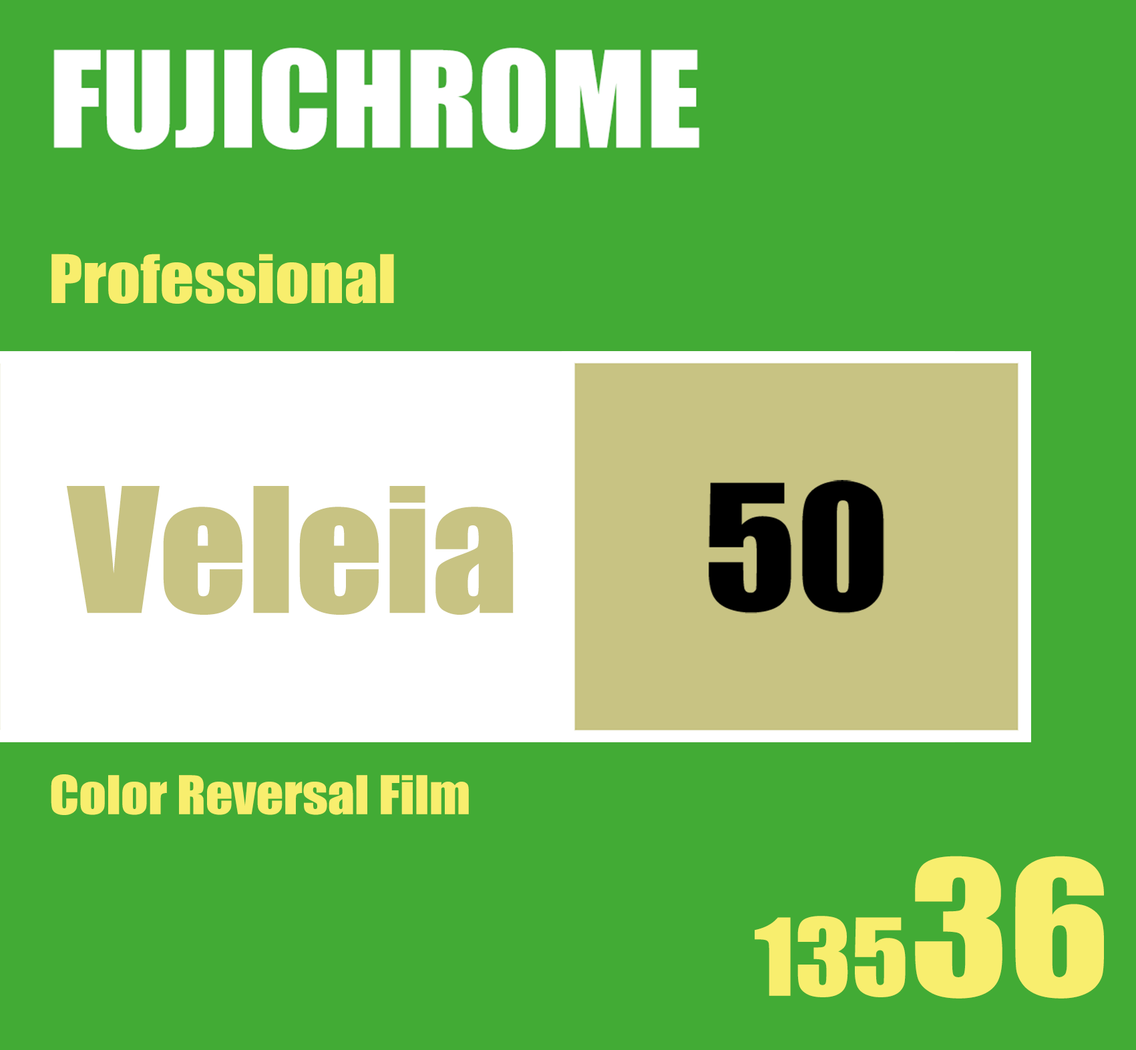
<style>
.page{position:relative;width:1136px;height:1050px;background:#42ab35}
.page>*{position:absolute;margin:0}
.t1{font:61.7px "Impact";color:#f8ee6d;scale:1.08 1}
.t2{font:160.5px "Impact";color:#c8c383;scale:1.08 1}
.t3{font:49.4px "Impact";color:#f8ee6e;scale:1.08 1}
.t4{font:172.8px "Impact";color:#f8ee6e;scale:1.08 1}
.t5{font:98.8px "Impact";color:#f8ee6e;scale:1.08 1}
</style>
<div class="page">
<p class="t1" style="left:51px;top:254px;width:343px;height:50px">Professional</p>
<p class="t2" style="left:67px;top:486px;width:446px;height:129px">Veleia</p>
<p class="t3" style="left:51px;top:774px;width:418px;height:41px">Color Reversal Film</p>
<p class="t4" style="left:915px;top:856px;width:189px;height:143px">36</p>
<p class="t5" style="left:754px;top:916px;width:151px;height:81px">135</p>
</div>
